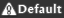
<style>
.page{position:relative;width:64px;height:18px;background:#333333}
.page>*{position:absolute;margin:0}
.t1{font:12.3px "AmiraParadiso";letter-spacing:0.05em;color:#ffffff}
</style>
<div class="page">
<p class="t1" style="left:18px;top:4px;width:44px;height:9px">Default</p>
</div>
